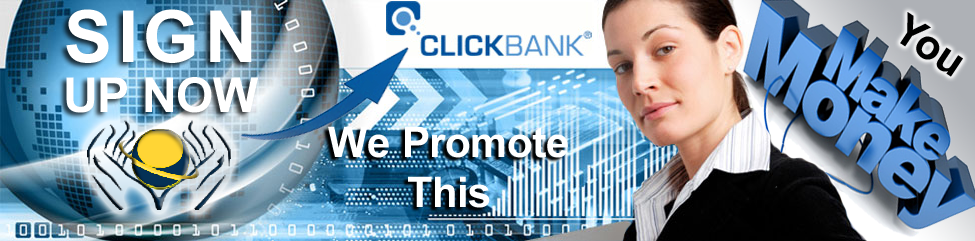
<style>
.page{position:relative;width:975px;height:241px}
.page>*{position:absolute;margin:0}
.t1{font:48px/50px "Arial-BoldMT";color:#ffffff}
.t2{font:72px/50px "Arial-BoldMT";letter-spacing:0.1em;color:#ffffff}
.t3{font:42px "Arial-BoldMT";color:#000000}
.t4{font:42px/50px "Arial-BoldMT";color:#ffffff}
</style>
<div class="page">
<p class="t1" style="left:66px;top:9px;width:193px;height:104px;text-align:center"><span class="t2">SIGN<br></span>UP NOW</p>
<p class="t3" style="left:900px;top:12px;width:63px;height:65px;rotate:34deg">You</p>
<p class="t4" style="left:328px;top:126px;width:240px;height:82px;text-align:center">We Promote<br>This</p>
</div>
